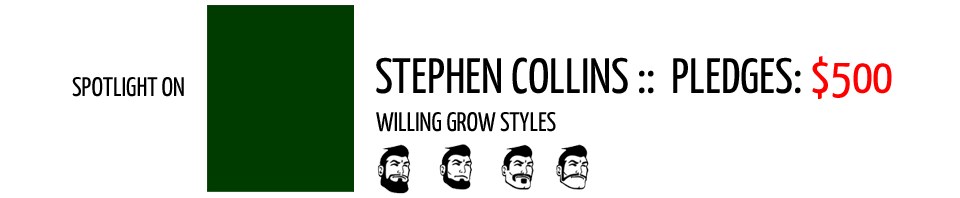
<style>
.page{position:relative;width:960px;height:198px;background:#ffffff}
.page>*{position:absolute;margin:0}
.t1{font:49.8px "YanoneKaffeesatz-Regular";color:#000000;text-transform:uppercase}
.t2{font:49.8px "YanoneKaffeesatz-Regular";color:#ff0000;text-transform:uppercase}
.t3{font:26.9px "YanoneKaffeesatz-Regular";color:#000000;text-transform:uppercase}
</style>
<div class="page">
<p class="t1" style="left:376px;top:56px;width:516px;height:43px">stephen collins ::  pledges: <span class="t2">$500</span></p>
<p class="t3" style="left:72px;top:77px;width:112px;height:20px">Spotlight on</p>
<p class="t3" style="left:376px;top:112px;width:180px;height:20px">willing grow styles</p>
</div>
